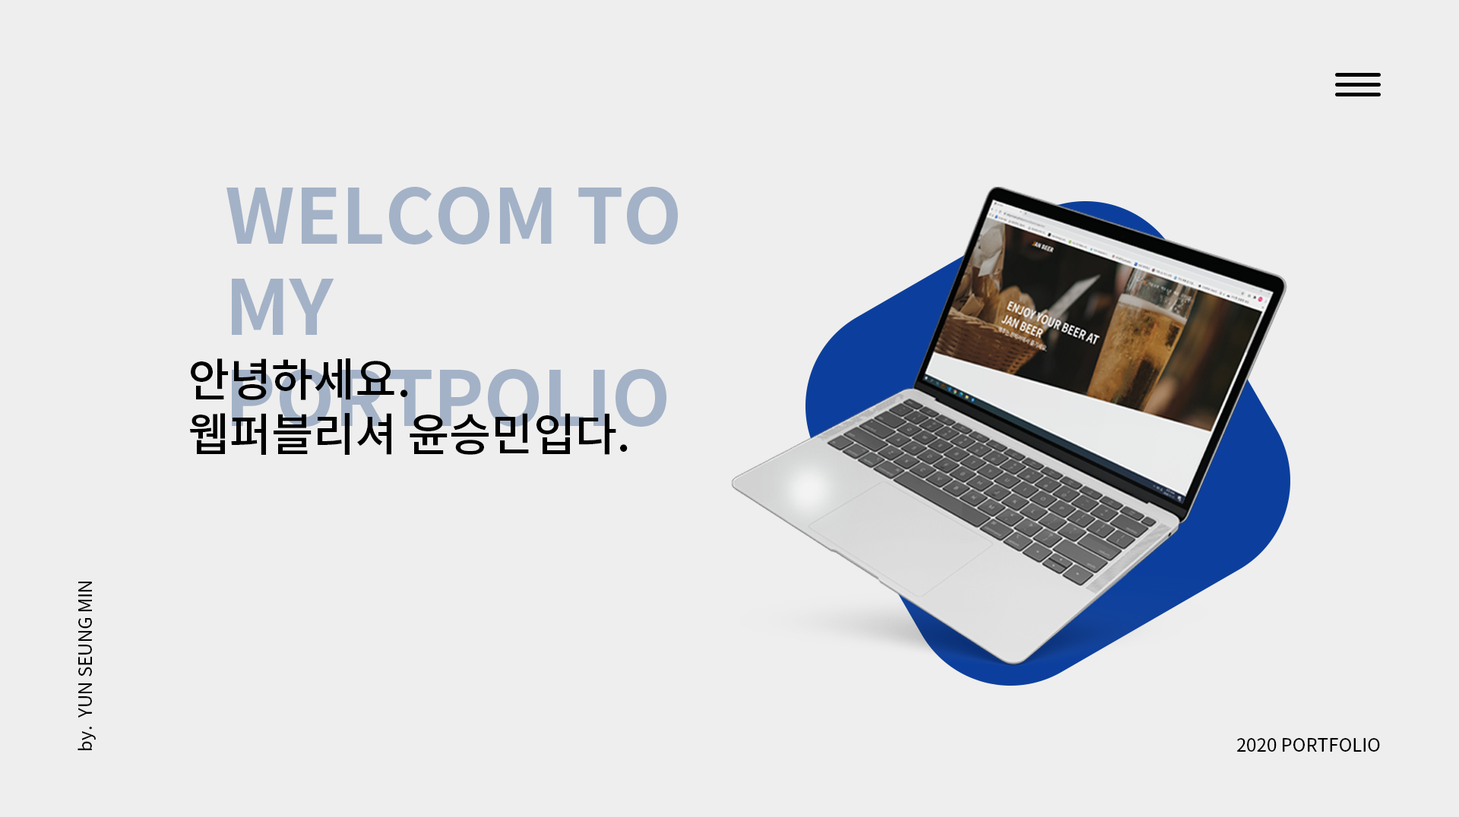
<style>
.page{position:relative;width:1459px;height:817px;background:#eeeeee}
.page>*{position:absolute;margin:0}
.t1{font:76px "NotoSansKR-Bold";color:#a3b2c7}
.t2{font:45.6px "NotoSansCJKkr-Medium";color:#000000}
.t3{font:18.2px "NotoSansKR-Regular";color:#000000}
</style>
<div class="page">
<p class="t1" style="left:226px;top:187px;width:452px;height:240px">WELCOM TO<br>MY <br>PORTPOLIO</p>
<p class="t2" style="left:190px;top:359px;width:438px;height:96px">안녕하세요.<br>웹퍼블리셔 윤승민입다.</p>
<p class="t3" style="left:77px;top:582px;width:19px;height:169px;rotate:-90deg">by.  YUN SEUNG MIN</p>
<p class="t3" style="left:1237px;top:738px;width:143px;height:14px">2020 PORTFOLIO</p>
</div>
